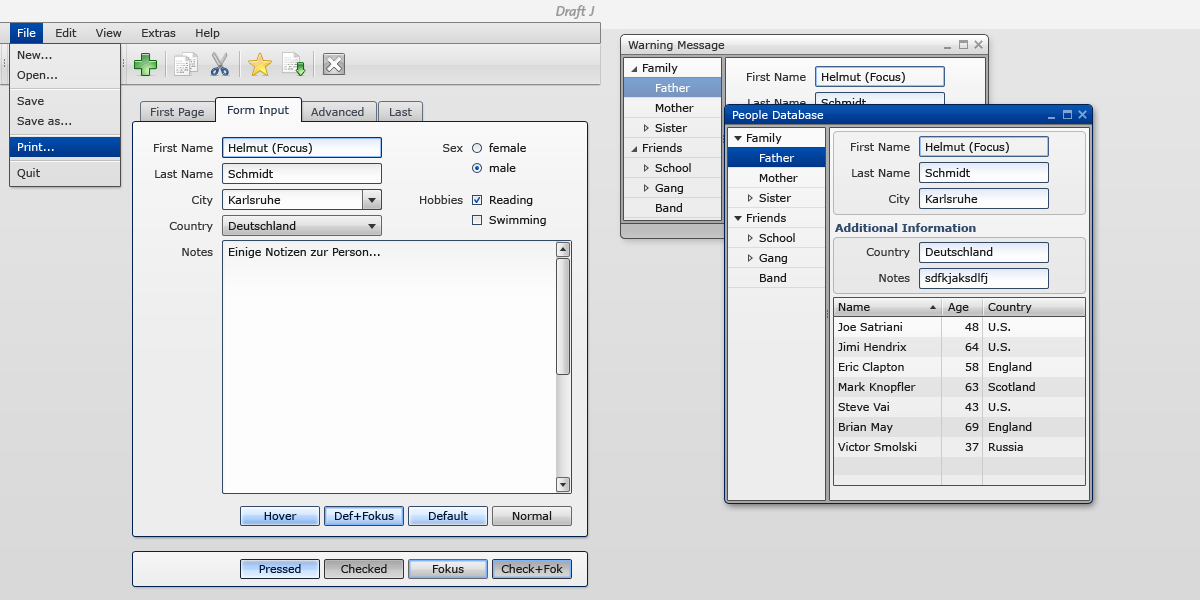
<style>
.page{position:relative;width:1200px;height:600px}
.page>*{position:absolute;margin:0}
.t1{font:14px "TheSans-B6SemiBoldItalic";color:#999999}
.t2{font:11px "Verdana";color:#333333}
.t3{font:11px "Verdana";color:#26364d}
.t4{font:11px "Verdana";color:#ffffff}
.t5{font:11px/20px "Verdana";color:#333333}
.t6{font:11px/26px "Verdana";color:#333333}
.t7{font:11px/26px "Verdana";color:#ffffff}
.t8{font:11px/20px "Verdana";color:#1a1a1a}
.t9{font:11px/20px "Verdana";color:#fffefe}
.t10{font:11px "Verdana";color:#3f4854}
.t11{font:11px/26px "Verdana";color:#1a1a1a}
.t12{font:11px/32px "Verdana";color:#1a1a1a}
.t13{font:11px/20px "Verdana";color:#ffffff}
.t14{font:11px "Verdana";color:#1a1a1a}
.t15{font:11px "Verdana-Bold";color:#314a6e}
.t16{font:11px "Verdana";color:#001533}
</style>
<div class="page">
<p class="t1" style="left:556px;top:5px;width:39px;height:14px">Draft J</p>
<p class="t2" style="left:18px;top:28px;width:202px;height:11px"><span class="t3">File     </span>Edit     View     Extras     Help</p>
<p class="t4" style="left:18px;top:28px;width:18px;height:9px">File</p>
<p class="t2" style="left:628px;top:40px;width:97px;height:11px">Warning Message</p>
<p class="t5" style="left:17px;top:51px;width:54px;height:128px">New...<br>Open...<br><span class="t6">Save<br></span>Save as...<br><span class="t7">Print...<br></span><span class="t6">Quit</span></p>
<p class="t8" style="left:643px;top:63px;width:39px;height:89px">Family<br><br><br><br>Friends</p>
<p class="t8" style="left:655px;top:83px;width:39px;height:129px"><span class="t9">Father<br></span>Mother<br>Sister<br><br>School<br>Gang<br>Band</p>
<p class="t10" style="left:151px;top:107px;width:53px;height:11px">First Page</p>
<p class="t3" style="left:228px;top:106px;width:61px;height:10px">Form Input</p>
<p class="t10" style="left:311px;top:107px;width:53px;height:9px">Advanced</p>
<p class="t10" style="left:390px;top:108px;width:22px;height:8px">Last</p>
<p class="t4" style="left:733px;top:110px;width:91px;height:11px">People Database</p>
<p class="t8" style="left:747px;top:133px;width:39px;height:89px">Family<br><br><br><br>Friends</p>
<p class="t6" style="left:154px;top:143px;width:59px;height:113px;text-align:right">First Name<br>Last Name<br>City<br>Country<br>Notes</p>
<p class="t11" style="left:228px;top:143px;width:152px;height:115px">Helmut (Focus)<br>Schmidt<br>Karlsruhe<br><br>Einige Notizen zur Person...</p>
<p class="t6" style="left:420px;top:144px;width:43px;height:60px;text-align:right">Sex<br><br>Hobbies</p>
<p class="t8" style="left:489px;top:143px;width:57px;height:83px"><span class="t11">female<br></span>male<br><span class="t12">Reading<br></span>Swimming</p>
<p class="t6" style="left:851px;top:142px;width:59px;height:63px;text-align:right">First Name<br>Last Name<br>City</p>
<p class="t11" style="left:925px;top:142px;width:84px;height:61px">Helmut (Focus)<br>Schmidt<br>Karlsruhe</p>
<p class="t8" style="left:759px;top:153px;width:39px;height:129px"><span class="t13">Father<br></span>Mother<br>Sister<br><br>School<br>Gang<br>Band</p>
<p class="t14" style="left:229px;top:221px;width:67px;height:9px">Deutschland</p>
<p class="t15" style="left:835px;top:223px;width:141px;height:9px">Additional Information</p>
<p class="t6" style="left:866px;top:248px;width:44px;height:34px;text-align:right">Country<br>Notes</p>
<p class="t11" style="left:925px;top:247px;width:68px;height:37px">Deutschland<br>sdfkjaksdlfj</p>
<p class="t14" style="left:838px;top:303px;width:32px;height:8px">Name</p>
<p class="t14" style="left:948px;top:303px;width:21px;height:10px">Age</p>
<p class="t14" style="left:988px;top:303px;width:44px;height:10px">Country</p>
<p class="t8" style="left:838px;top:322px;width:79px;height:129px">Joe Satriani<br>Jimi Hendrix<br>Eric Clapton<br>Mark Knopfler<br>Steve Vai<br>Brian May<br>Victor Smolski</p>
<p class="t8" style="left:965px;top:323px;width:14px;height:128px;text-align:right">48<br>64<br>58<br>63<br>43<br>69<br>37</p>
<p class="t8" style="left:988px;top:323px;width:47px;height:128px">U.S.<br>U.S.<br>England<br>Scotland<br>U.S.<br>England<br>Russia</p>
<p class="t16" style="left:264px;top:512px;width:33px;height:8px">Hover</p>
<p class="t16" style="left:335px;top:511px;width:59px;height:9px">Def+Fokus</p>
<p class="t16" style="left:429px;top:511px;width:39px;height:9px">Default</p>
<p class="t14" style="left:512px;top:511px;width:40px;height:9px">Normal</p>
<p class="t16" style="left:259px;top:564px;width:42px;height:9px">Pressed</p>
<p class="t14" style="left:341px;top:564px;width:46px;height:9px">Checked</p>
<p class="t14" style="left:433px;top:564px;width:31px;height:9px">Fokus</p>
<p class="t14" style="left:501px;top:564px;width:62px;height:9px">Check+Fok</p>
</div>
